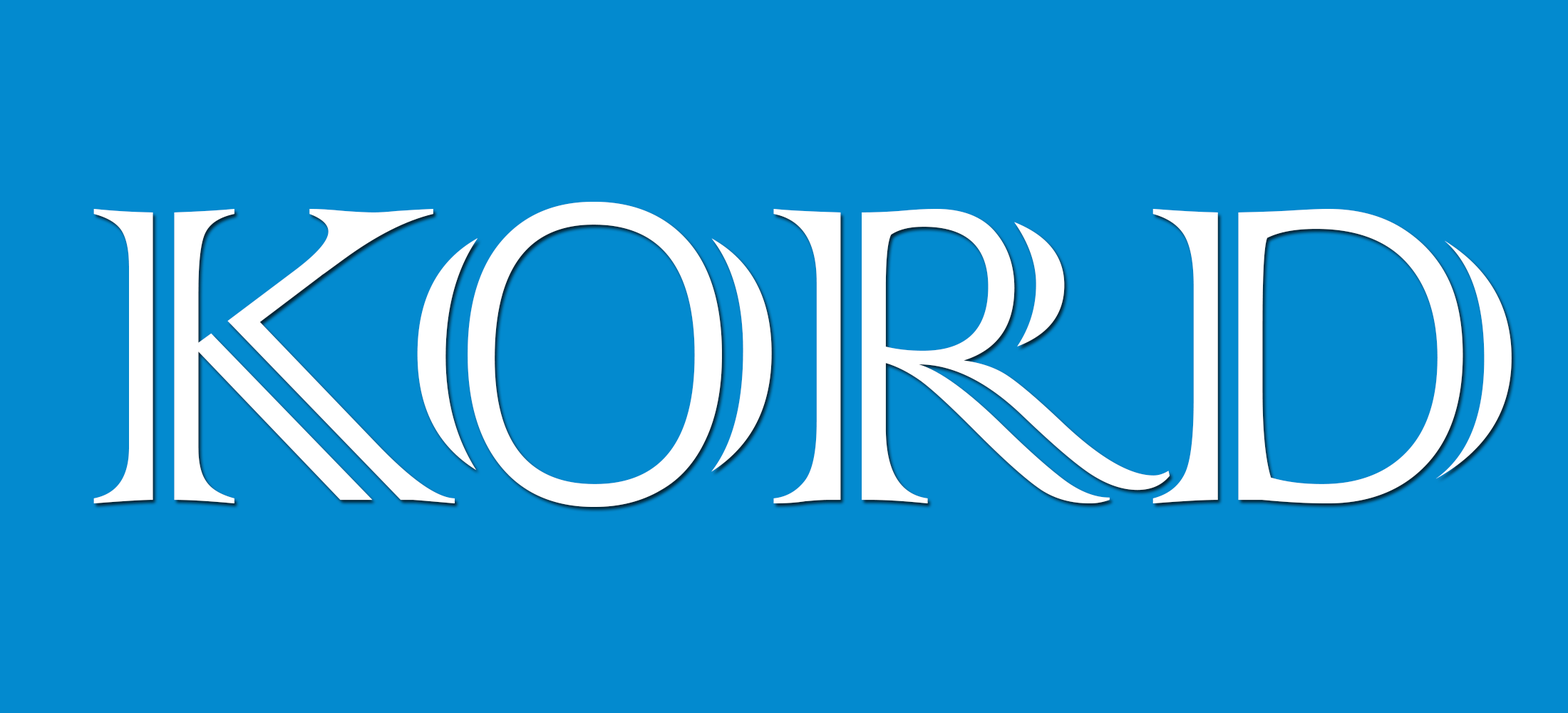
<style>
.page{position:relative;width:1568px;height:713px;background:#038acf}
.page>*{position:absolute;margin:0}
.t1{font:558.1px "ColonnaMT";letter-spacing:-0.05em;color:#ffffff;scale:1.06 1}
</style>
<div class="page">
<p class="t1" style="left:93px;top:202px;width:1419px;height:305px">KORD</p>
</div>
